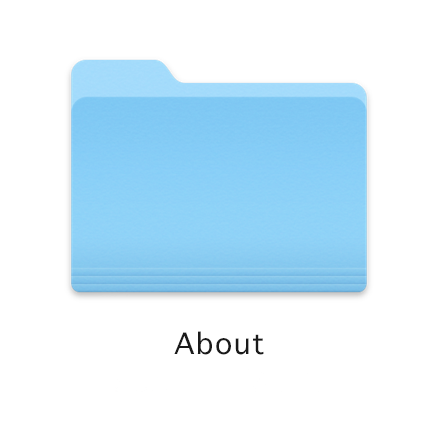
<style>
.page{position:relative;width:438px;height:438px;background:#ffffff}
.page>*{position:absolute;margin:0}
.t1{font:40px "AppleSymbols";letter-spacing:0.04em;color:#1a1a1a}
</style>
<div class="page">
<p class="t1" style="left:174px;top:331px;width:90px;height:24px">About</p>
</div>
